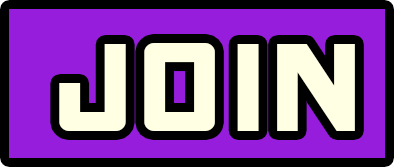
<style>
.page{position:relative;width:394px;height:167px;background:#971ddd}
.page>*{position:absolute;margin:0}
.t1{font:200px "ONRAMP";color:#ffffe3}
</style>
<div class="page">
<p class="t1" style="left:59px;top:43px;width:296px;height:88px">join</p>
</div>
